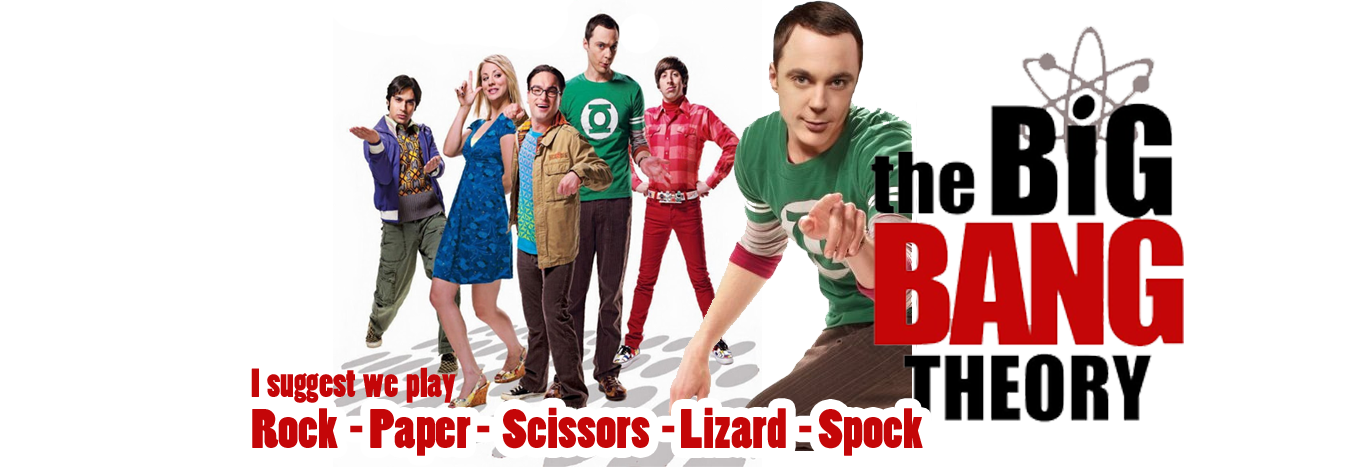
<style>
.page{position:relative;width:1366px;height:467px;background:#ffffff}
.page>*{position:absolute;margin:0}
.t1{font:38.1px "PoplarStd";color:#c40608}
.t2{font:51.9px "PoplarStd";color:#c40608;scale:1.05 1}
.t3{font:42.8px "PoplarStd";color:#c40608;scale:1.05 1}
</style>
<div class="page">
<p class="t1" style="left:251px;top:367px;width:205px;height:36px">I  suggest  we  play</p>
<p class="t2" style="left:252px;top:407px;width:671px;height:49px"><span class="t3"><br></span>Rock  - Paper -  Scissors  - Lizard  - Spock</p>
</div>
